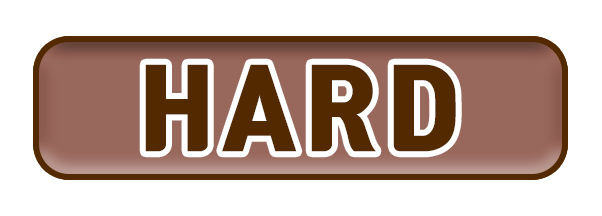
<style>
.page{position:relative;width:602px;height:216px;background:#ffffff}
.page>*{position:absolute;margin:0}
.t1{font:100px "TmonMonsoriBlack";letter-spacing:0.1em;color:#532a00}
</style>
<div class="page">
<p class="t1" style="left:145px;top:64px;width:311px;height:88px">HARD</p>
</div>
